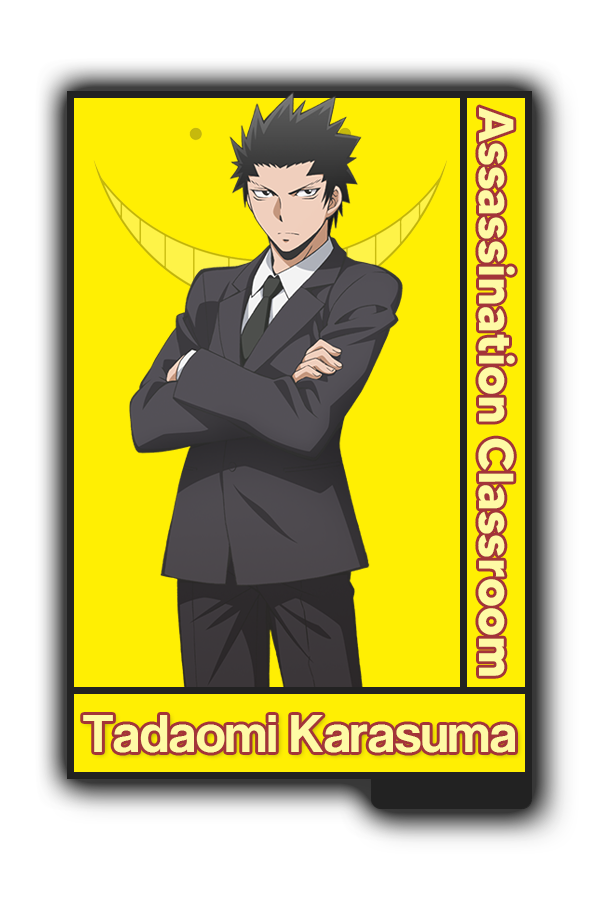
<style>
.page{position:relative;width:600px;height:900px;background:#ffef03}
.page>*{position:absolute;margin:0}
.t1{font:48.8px "MADETOMMY-Bold";color:#fefaa5}
.t2{font:55px "CoolveticaRg-Regular";color:#fefaa5}
</style>
<div class="page">
<p class="t1" style="left:478px;top:107px;width:37px;height:569px;rotate:90deg">Assassination Classroom</p>
<p class="t2" style="left:83px;top:715px;width:432px;height:38px">Tadaomi Karasuma</p>
</div>
